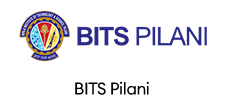
<style>
.page{position:relative;width:225px;height:96px;background:#ffffff}
.page>*{position:absolute;margin:0}
.t1{font:16.7px "EuclidCircularA-Regular";letter-spacing:-0.025em;color:#000000}
</style>
<div class="page">
<p class="t1" style="left:75px;top:81px;width:74px;height:14px">BITS Pilani</p>
</div>
